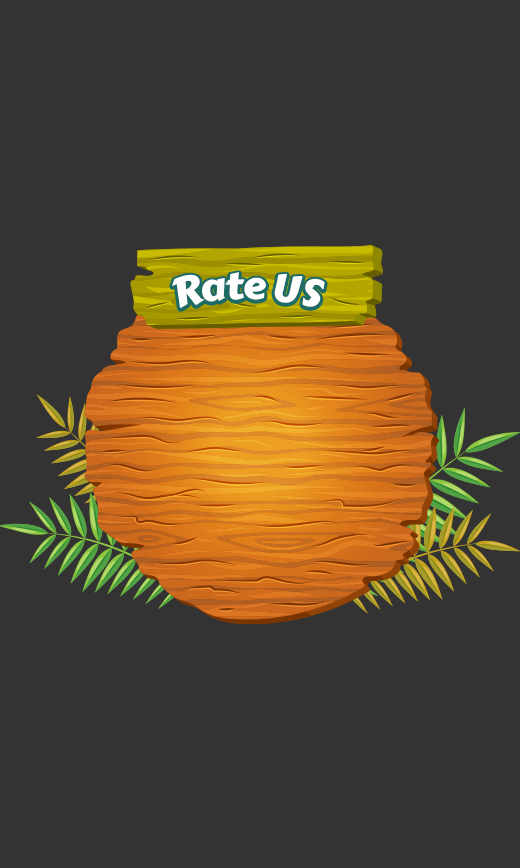
<style>
.page{position:relative;width:520px;height:868px;background:#333333}
.page>*{position:absolute;margin:0}
.t1{font:38px "CarterOne";letter-spacing:-0.02em;color:#ffffff}
</style>
<div class="page">
<p class="t1" style="left:172px;top:272px;width:153px;height:36px">Rate US</p>
</div>
